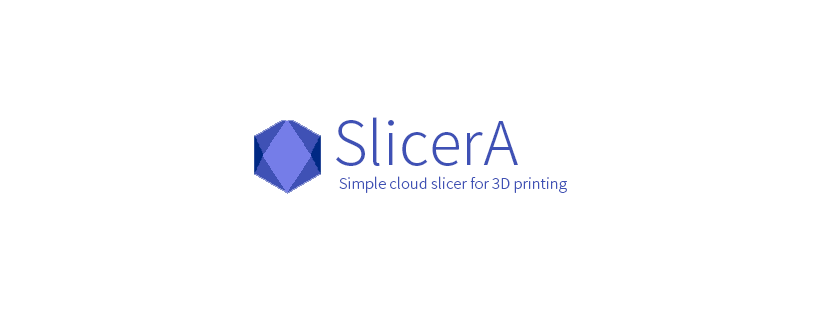
<style>
.page{position:relative;width:820px;height:312px;background:#ffffff}
.page>*{position:absolute;margin:0}
.t1{font:60px "NotoSansCJKtc-Light";color:#3f51b5}
.t2{font:15px "NotoSansCJKtc-Light";color:#3f51b5}
</style>
<div class="page">
<p class="t1" style="left:336px;top:117px;width:182px;height:49px">SlicerA</p>
<p class="t2" style="left:339px;top:176px;width:228px;height:17px">Simple cloud slicer for 3D printing</p>
</div>
